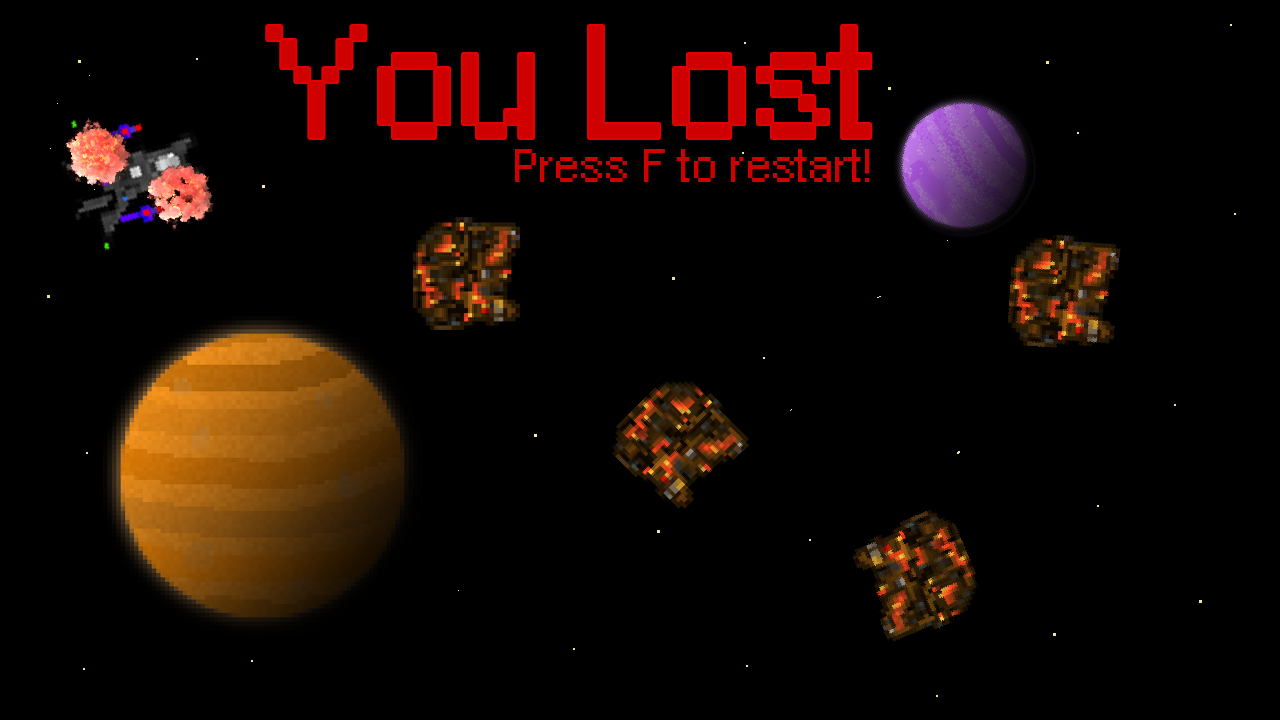
<style>
.page{position:relative;width:1280px;height:720px;background:#000000}
.page>*{position:absolute;margin:0}
.t1{font:112px "PixelArial11";color:#ce0000}
.t2{font:33.3px "PixelArial11";color:#ce0000}
</style>
<div class="page">
<p class="t1" style="left:267px;top:26px;width:604px;height:112px">You Lost</p>
<p class="t2" style="left:515px;top:149px;width:355px;height:33px">Press F to restart!</p>
</div>
